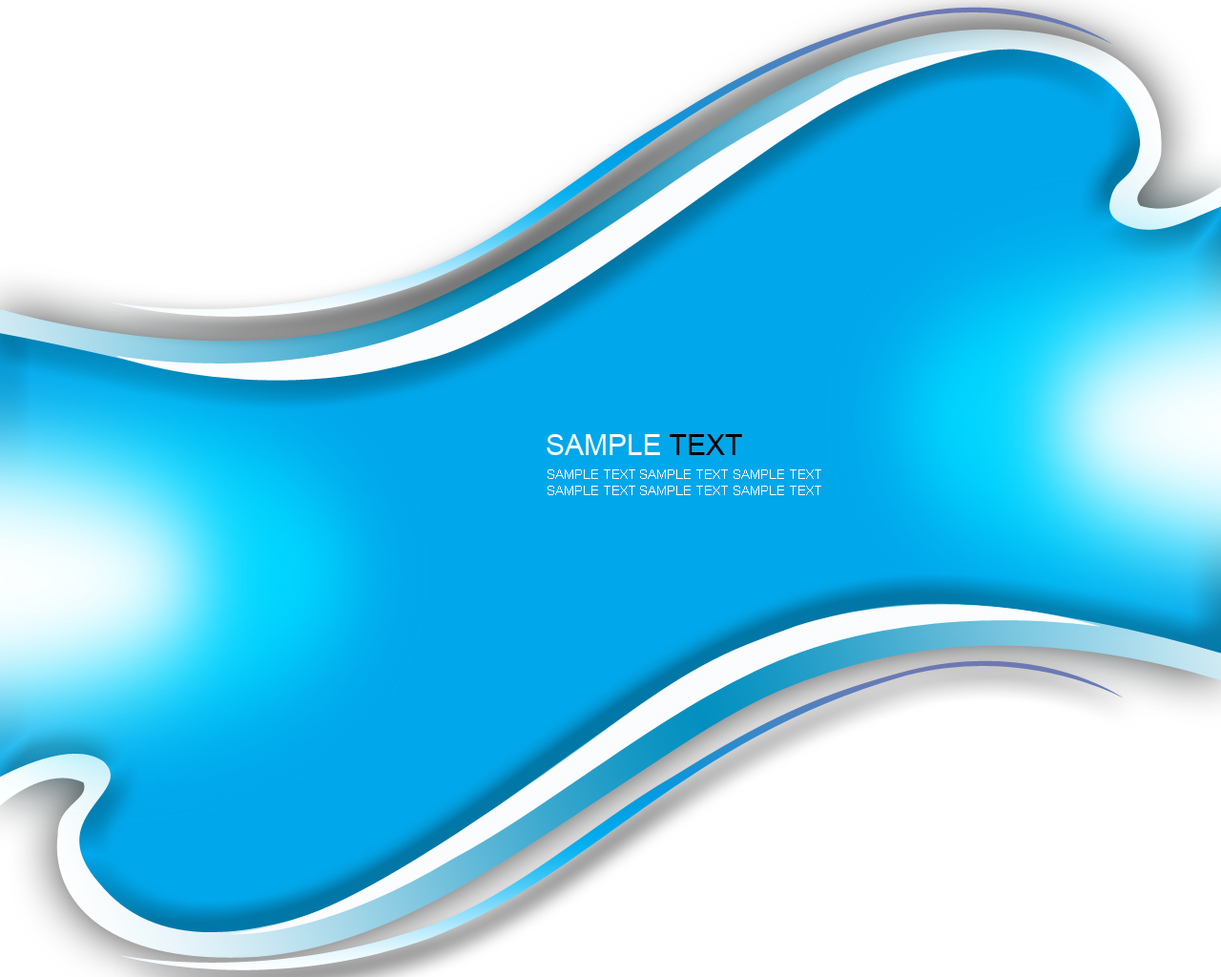
<style>
.page{position:relative;width:1221px;height:977px;background:#ffffff}
.page>*{position:absolute;margin:0}
.t1{font:28.6px "ArialMT";color:#ffffff}
.t2{font:28.6px "ArialMT";color:#000000}
.t3{font:13.4px "ArialMT";color:#ffffff}
</style>
<div class="page">
<p class="t1" style="left:547px;top:434px;width:195px;height:21px">SAMPLE <span class="t2">TEXT</span></p>
<p class="t3" style="left:547px;top:469px;width:274px;height:10px">SAMPLE TEXT SAMPLE TEXT SAMPLE TEXT</p>
<p class="t3" style="left:547px;top:485px;width:274px;height:10px">SAMPLE TEXT SAMPLE TEXT SAMPLE TEXT</p>
</div>
